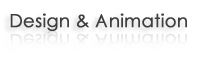
<style>
.page{position:relative;width:200px;height:57px;background:#ffffff}
.page>*{position:absolute;margin:0}
.t1{font:18px "CenturyGothic";letter-spacing:-0.005em;color:#3e3e3e;font-weight:bold}
.t2{font:18px "CenturyGothic";letter-spacing:-0.005em;color:#efefef;font-weight:bold}
</style>
<div class="page">
<p class="t1" style="left:10px;top:13px;width:177px;height:18px">Design &amp; Animation</p>
<p class="t2" style="left:10px;top:30px;width:177px;height:18px">Design &amp; Animation</p>
</div>
